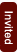
<style>
.page{position:relative;width:17px;height:52px;background:#650701}
.page>*{position:absolute;margin:0}
.t1{font:11px "ArialMT";letter-spacing:0.025em;color:#ffffff}
</style>
<div class="page">
<p class="t1" style="left:4px;top:11px;width:9px;height:33px;rotate:90deg">Invited</p>
</div>
